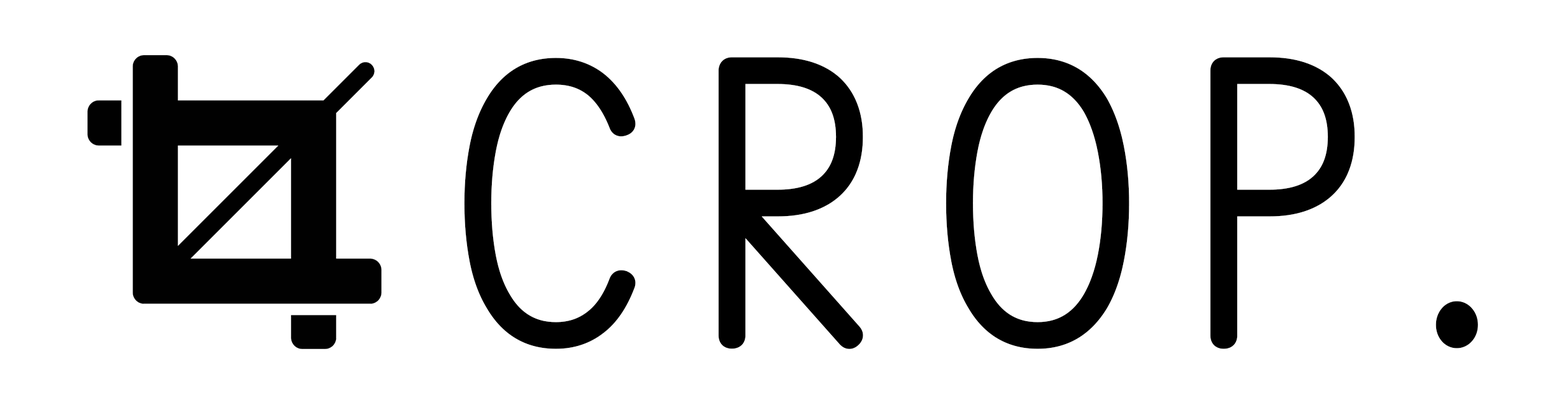
<style>
.page{position:relative;width:1568px;height:408px;background:#ffffff}
.page>*{position:absolute;margin:0}
.t1{font:541.4px "SimplePrint-Regular";letter-spacing:0.1em;color:#000000;font-weight:bold}
</style>
<div class="page">
<p class="t1" style="left:464px;top:57px;width:1014px;height:292px">CROP.</p>
</div>
